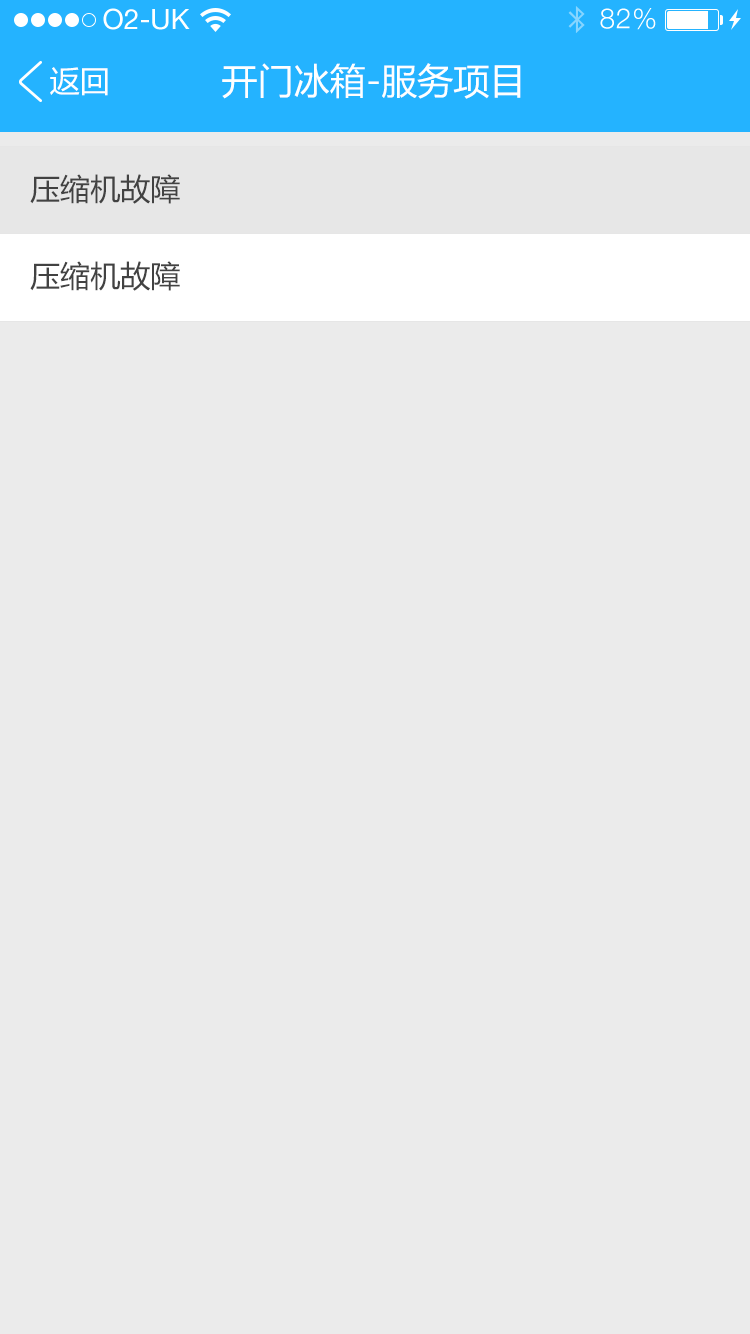
<style>
.page{position:relative;width:750px;height:1334px;background:#ebebeb}
.page>*{position:absolute;margin:0}
.t1{font:36px "MicrosoftYaHei";color:#feffff}
.t2{font:30px "MicrosoftYaHei";color:#ffffff}
.t3{font:30px "MicrosoftYaHei";color:#424242}
</style>
<div class="page">
<p class="t1" style="left:222px;top:63px;width:299px;height:36px">开门冰箱-服务项目</p>
<p class="t2" style="left:50px;top:67px;width:58px;height:29px">返回</p>
<p class="t3" style="left:30px;top:174px;width:150px;height:30px">压缩机故障</p>
<p class="t3" style="left:30px;top:261px;width:150px;height:30px">压缩机故障</p>
</div>
